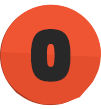
<style>
.page{position:relative;width:101px;height:109px;background:#f05533}
.page>*{position:absolute;margin:0}
.t1{font:72px "MovaviGrotesqueBlack";color:#282828}
</style>
<div class="page">
<p class="t1" style="left:31px;top:29px;width:40px;height:53px">0</p>
</div>
